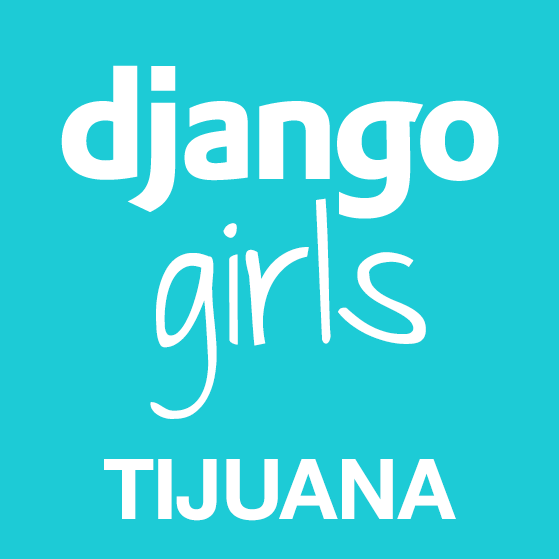
<style>
.page{position:relative;width:559px;height:559px;background:#1dcbd6}
.page>*{position:absolute;margin:0}
.t1{font:170px "JustTheWayYouAre";color:#ffffff}
.t2{font:84px "HelveticaNeue-Bold";color:#ffffff;text-transform:uppercase}
</style>
<div class="page">
<p class="t1" style="left:150px;top:198px;width:276px;height:221px">girls</p>
<p class="t2" style="left:104px;top:459px;width:352px;height:62px">Tijuana</p>
</div>
